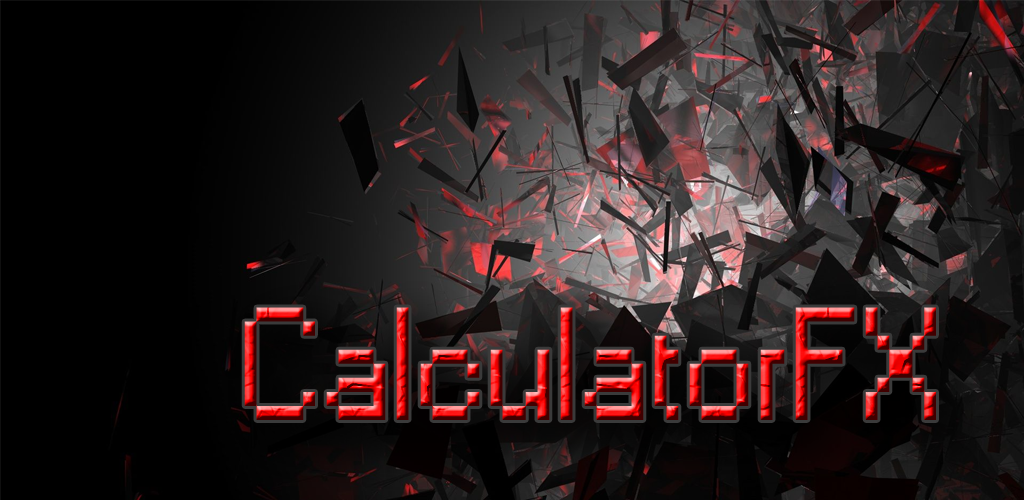
<style>
.page{position:relative;width:1024px;height:500px;background:#000000}
.page>*{position:absolute;margin:0}
.t1{font:150px "Small Fonts"}
</style>
<div class="page">
<p class="t1" style="left:244px;top:307px;width:692px;height:113px">CalculatorFX</p>
</div>
